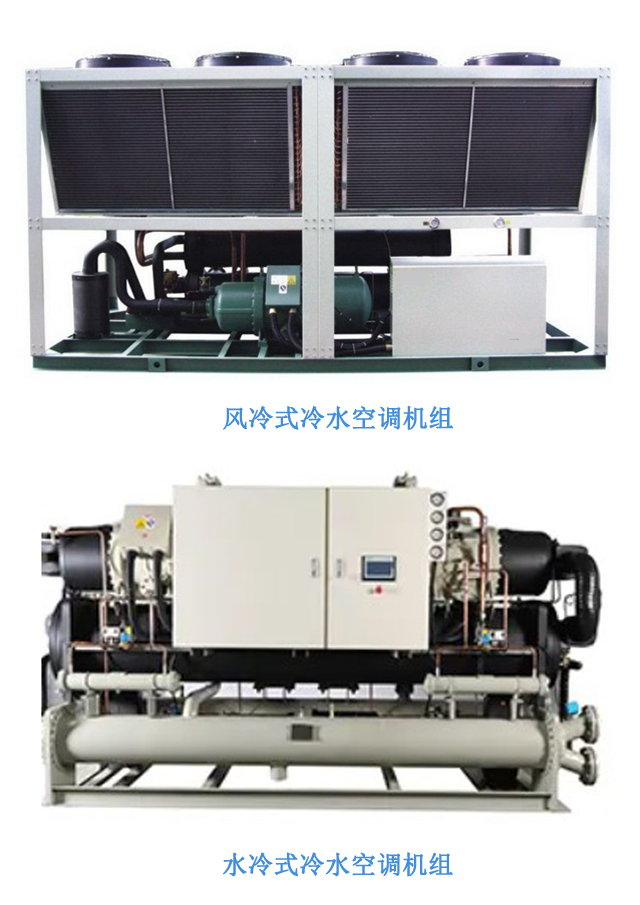
<style>
.page{position:relative;width:640px;height:905px;background:#ffffff}
.page>*{position:absolute;margin:0}
.t1{font:25.1px "SimSun";color:#438edb;font-weight:bold}
</style>
<div class="page">
<p class="t1" style="left:223px;top:405px;width:231px;height:25px">风冷式冷水空调机组</p>
<p class="t1" style="left:223px;top:852px;width:230px;height:25px">水冷式冷水空调机组</p>
</div>
